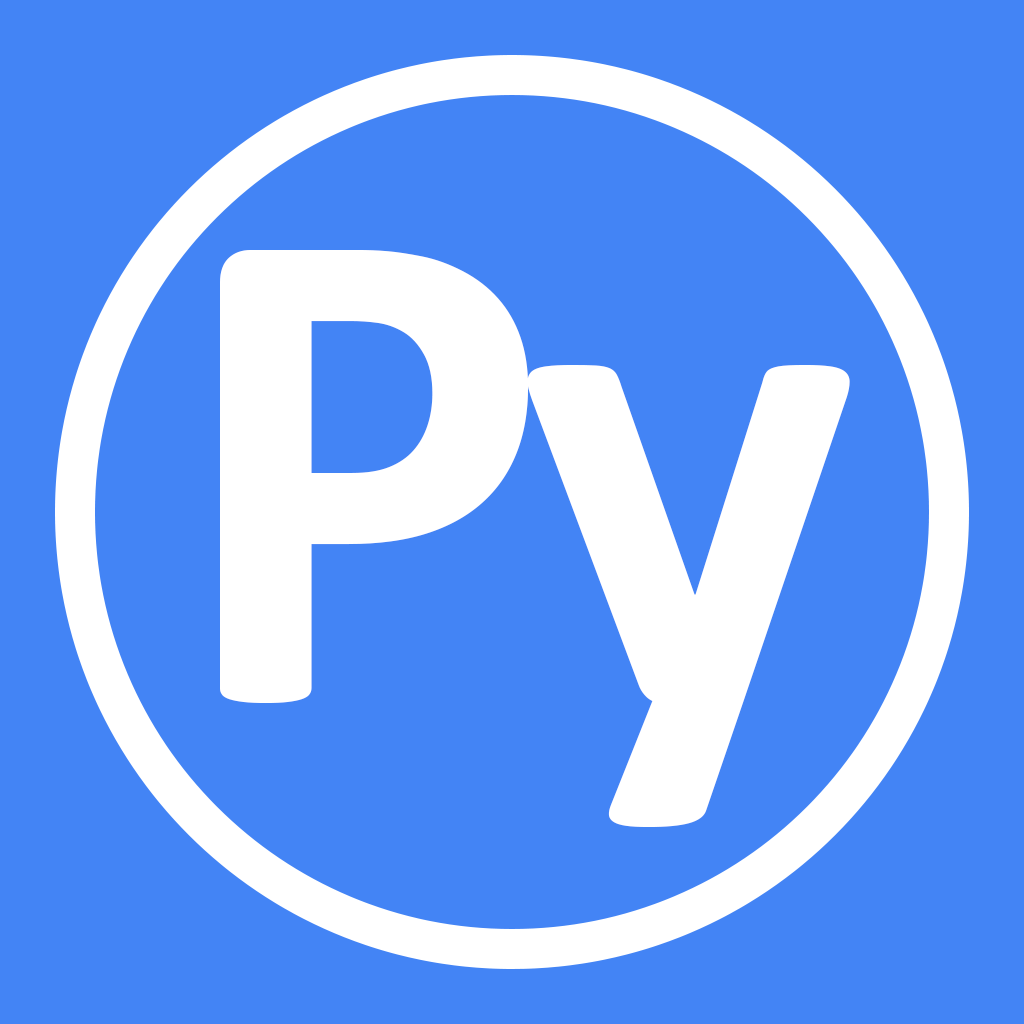
<style>
.page{position:relative;width:1024px;height:1024px;background:#4384f5}
.page>*{position:absolute;margin:0}
.t1{font:713.4px "Calibri-Bold";letter-spacing:-0.05em;color:#ffffff}
</style>
<div class="page">
<p class="t1" style="left:220px;top:250px;width:630px;height:577px">Py</p>
</div>
